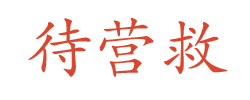
<style>
.page{position:relative;width:250px;height:100px;background:#ffffff}
.page>*{position:absolute;margin:0}
.t1{font:66.7px "STKaitiSC-Regular";color:#d8472f}
</style>
<div class="page">
<p class="t1" style="left:28px;top:17px;width:200px;height:60px">待营救</p>
</div>
